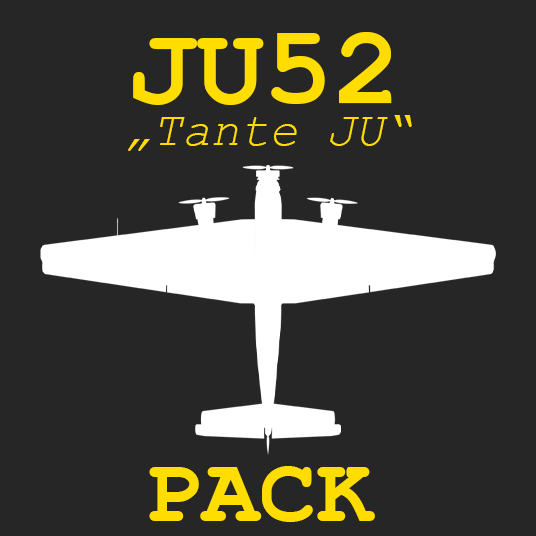
<style>
.page{position:relative;width:536px;height:536px;background:#262626}
.page>*{position:absolute;margin:0}
.t1{font:114.4px "CourierNewPS-BoldMT";color:#ffdd00}
.t2{font:48.2px "CourierNewPS-ItalicMT";color:#ffdd00}
.t3{font:95.3px "CourierNewPS-BoldMT";color:#ffdd00}
</style>
<div class="page">
<p class="t1" style="left:133px;top:32px;width:259px;height:73px">JU52</p>
<p class="t2" style="left:128px;top:115px;width:284px;height:36px">„Tante JU“</p>
<p class="t3" style="left:149px;top:466px;width:226px;height:56px">PACK</p>
</div>
